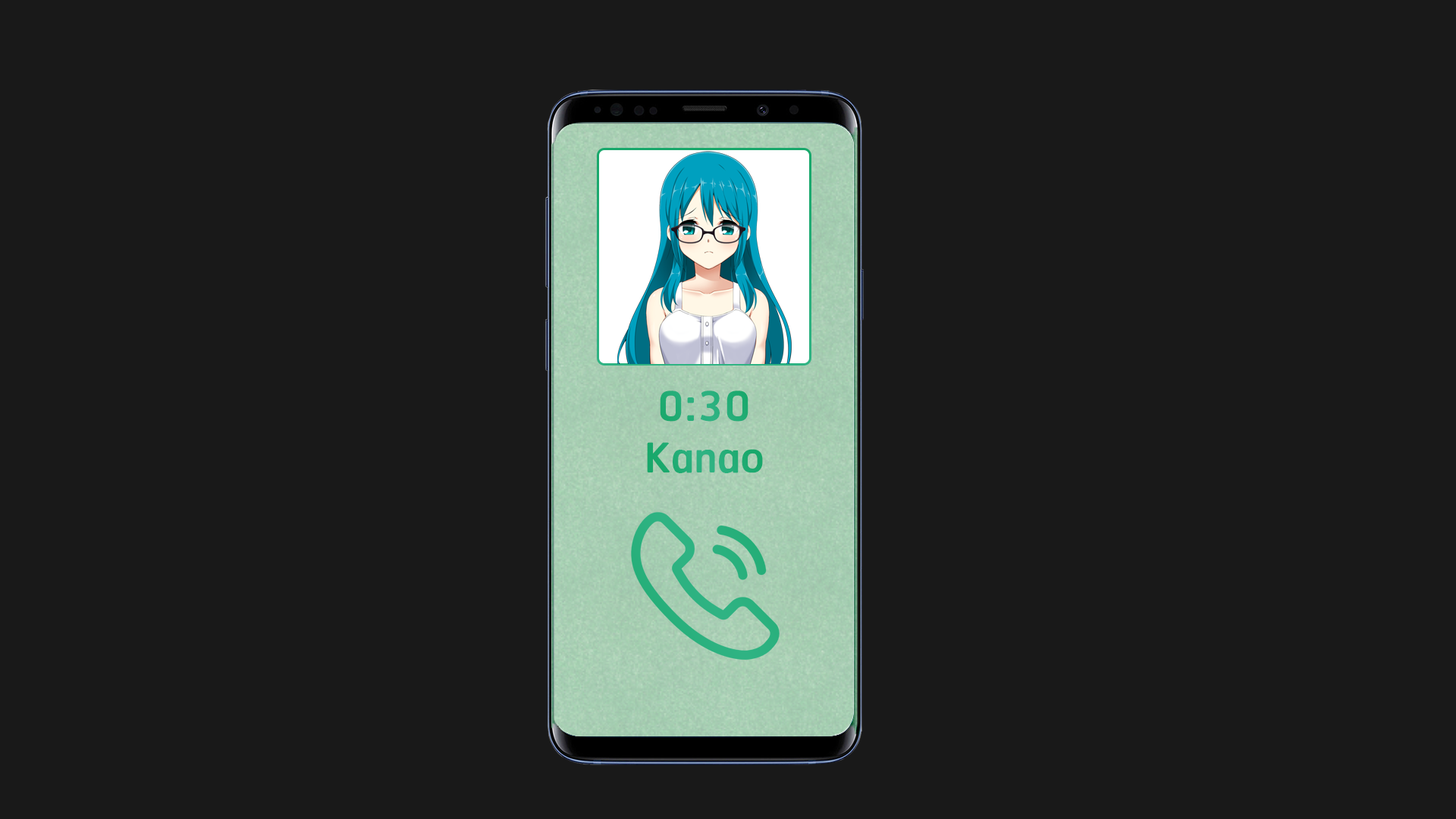
<style>
.page{position:relative;width:1456px;height:819px;background:#191919}
.page>*{position:absolute;margin:0}
.t1{font:54.6px "RSU-Bold";color:#23ad77}
.t2{font:54.6px "RSU-Bold";color:#21ac74}
</style>
<div class="page">
<p class="t1" style="left:660px;top:391px;width:88px;height:31px">0:30</p>
<p class="t2" style="left:647px;top:442px;width:116px;height:31px">Kanao</p>
</div>
